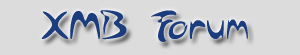
<style>
.page{position:relative;width:300px;height:55px;background:#dcdcdc}
.page>*{position:absolute;margin:0}
.t1{font:36px "Arabolical1";color:#1c3d7d}
</style>
<div class="page">
<p class="t1" style="left:41px;top:10px;width:207px;height:32px">XMB Forum</p>
</div>
